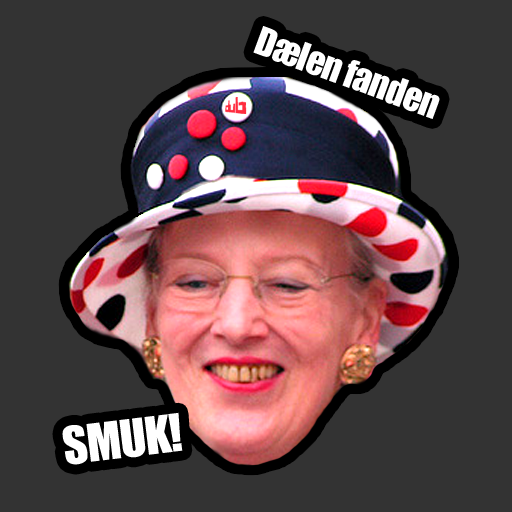
<style>
.page{position:relative;width:512px;height:512px;background:#333333}
.page>*{position:absolute;margin:0}
.t1{font:36px "Impact";letter-spacing:-0.025em;color:#ffffff}
.t2{font:48px "Impact";letter-spacing:-0.025em;color:#ffffff}
</style>
<div class="page">
<p class="t1" style="left:253px;top:26px;width:187px;height:93px;rotate:20deg">Dælen fanden</p>
<p class="t2" style="left:62px;top:412px;width:121px;height:53px;rotate:-7deg">SMUK!</p>
</div>
